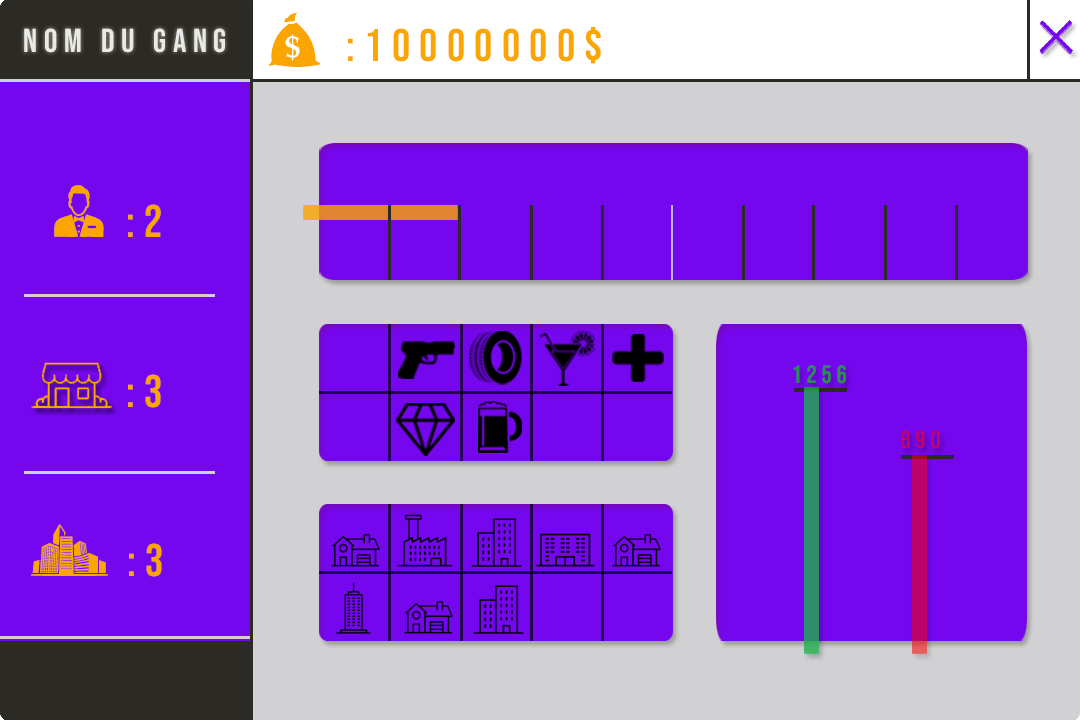
<style>
.page{position:relative;width:1080px;height:720px;background:#7407ee}
.page>*{position:absolute;margin:0}
.t1{font:78.4px "Casino";letter-spacing:0.2em;color:#faa500}
.t2{font:33.3px "BebasNeue-Regular";letter-spacing:0.2em;color:#e9e9e9}
.t3{font:45.8px "BebasNeue-Regular";letter-spacing:0.2em;color:#faa500}
.t4{font:75px "Casino";letter-spacing:0.2em;color:#faa500}
.t5{font:25px "BebasNeue-Regular";letter-spacing:0.2em;color:#229443}
.t6{font:25px "BebasNeue-Regular";letter-spacing:0.2em;color:#be036b}
</style>
<div class="page">
<p class="t1" style="left:268px;top:12px;width:53px;height:55px">l</p>
<p class="t2" style="left:24px;top:28px;width:201px;height:25px">nom du gang</p>
<p class="t3" style="left:348px;top:27px;width:253px;height:37px">:10000000$</p>
<p class="t4" style="left:54px;top:185px;width:50px;height:52px">0</p>
<p class="t3" style="left:128px;top:204px;width:33px;height:33px">:2</p>
<p class="t5" style="left:793px;top:365px;width:53px;height:19px">1256</p>
<p class="t3" style="left:128px;top:374px;width:33px;height:34px">:3</p>
<p class="t6" style="left:901px;top:430px;width:39px;height:19px">890</p>
<p class="t4" style="left:31px;top:524px;width:77px;height:52px">.</p>
<p class="t3" style="left:129px;top:543px;width:33px;height:34px">:3</p>
</div>
